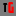
<style>
.page{position:relative;width:16px;height:16px;background:#7b7b7b}
.page>*{position:absolute;margin:0}
.t1{font:12px "AmericanCaptain";color:#000000}
.t2{font:14.3px "AmericanCaptain";color:#ff0000}
</style>
<div class="page">
<p class="t1" style="left:3px;top:3px;width:5px;height:9px">t</p>
<p class="t2" style="left:8px;top:2px;width:6px;height:11px">g</p>
</div>
